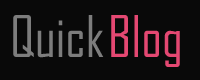
<style>
.page{position:relative;width:200px;height:80px;background:#090909}
.page>*{position:absolute;margin:0}
.t1{font:55px "AgencyFB-Reg";color:#7d7d7d}
.t2{font:55px "AgencyFB-Reg";color:#e44872}
</style>
<div class="page">
<p class="t1" style="left:13px;top:15px;width:91px;height:43px">Quick</p>
<p class="t2" style="left:111px;top:15px;width:69px;height:52px">Blog</p>
</div>
